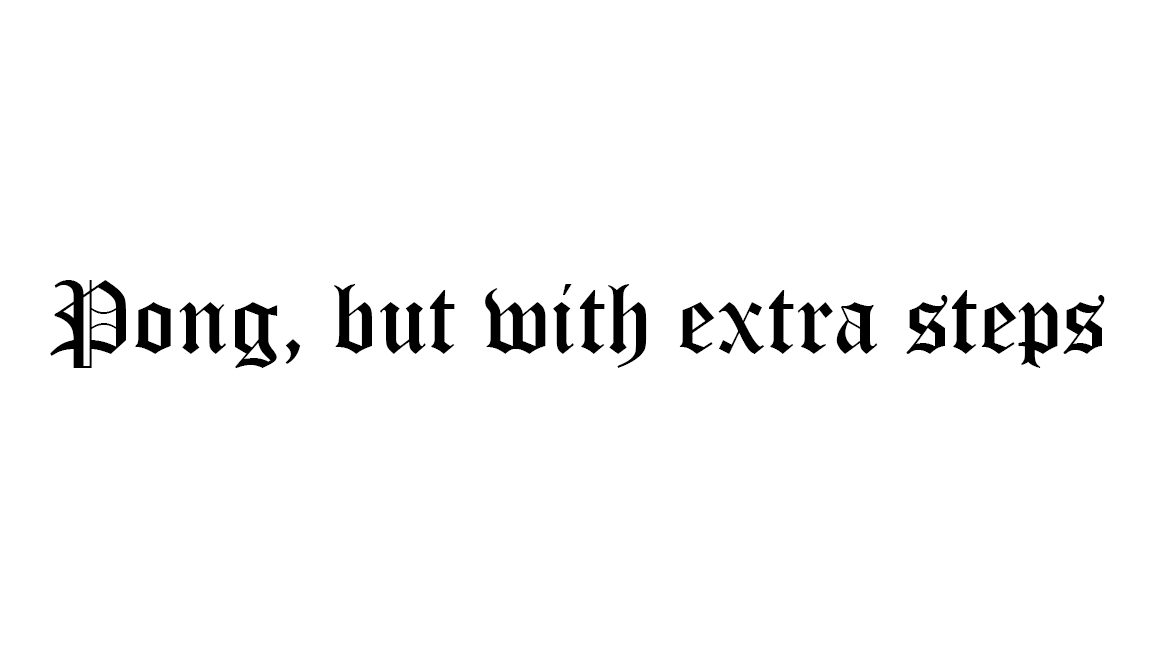
<style>
.page{position:relative;width:1152px;height:648px;background:#ffffff}
.page>*{position:absolute;margin:0}
.t1{font:100px "OldEnglishTextMT";color:#000000}
</style>
<div class="page">
<p class="t1" style="left:50px;top:280px;width:1055px;height:89px">Pong, but with extra steps</p>
</div>
